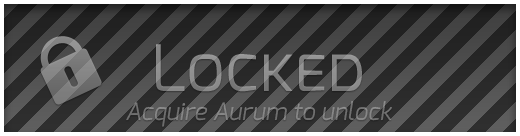
<style>
.page{position:relative;width:520px;height:136px}
.page>*{position:absolute;margin:0}
.t1{font:24px "Exo-Italic";color:#868686}
.t2{font:64px "Exo-Regular";color:#868686;font-variant:small-caps}
</style>
<div class="page">
<p class="t1" style="left:126px;top:44px;width:266px;height:83px;text-align:center"><span class="t2">Locked<br></span>Acquire Aurum to unlock</p>
</div>
